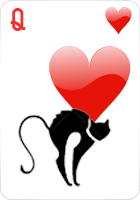
<style>
.page{position:relative;width:140px;height:200px;background:#ffffff}
.page>*{position:absolute;margin:0}
.t1{font:26px "CardCharacters";color:#ff2b2b}
</style>
<div class="page">
<p class="t1" style="left:10px;top:8px;width:16px;height:23px">Q</p>
</div>
